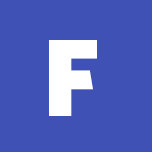
<style>
.page{position:relative;width:152px;height:152px;background:#3f51b5}
.page>*{position:absolute;margin:0}
.t1{font:110px "WhitneyHTF-Black";color:#ffffff}
</style>
<div class="page">
<p class="t1" style="left:49px;top:40px;width:48px;height:76px">F</p>
</div>
